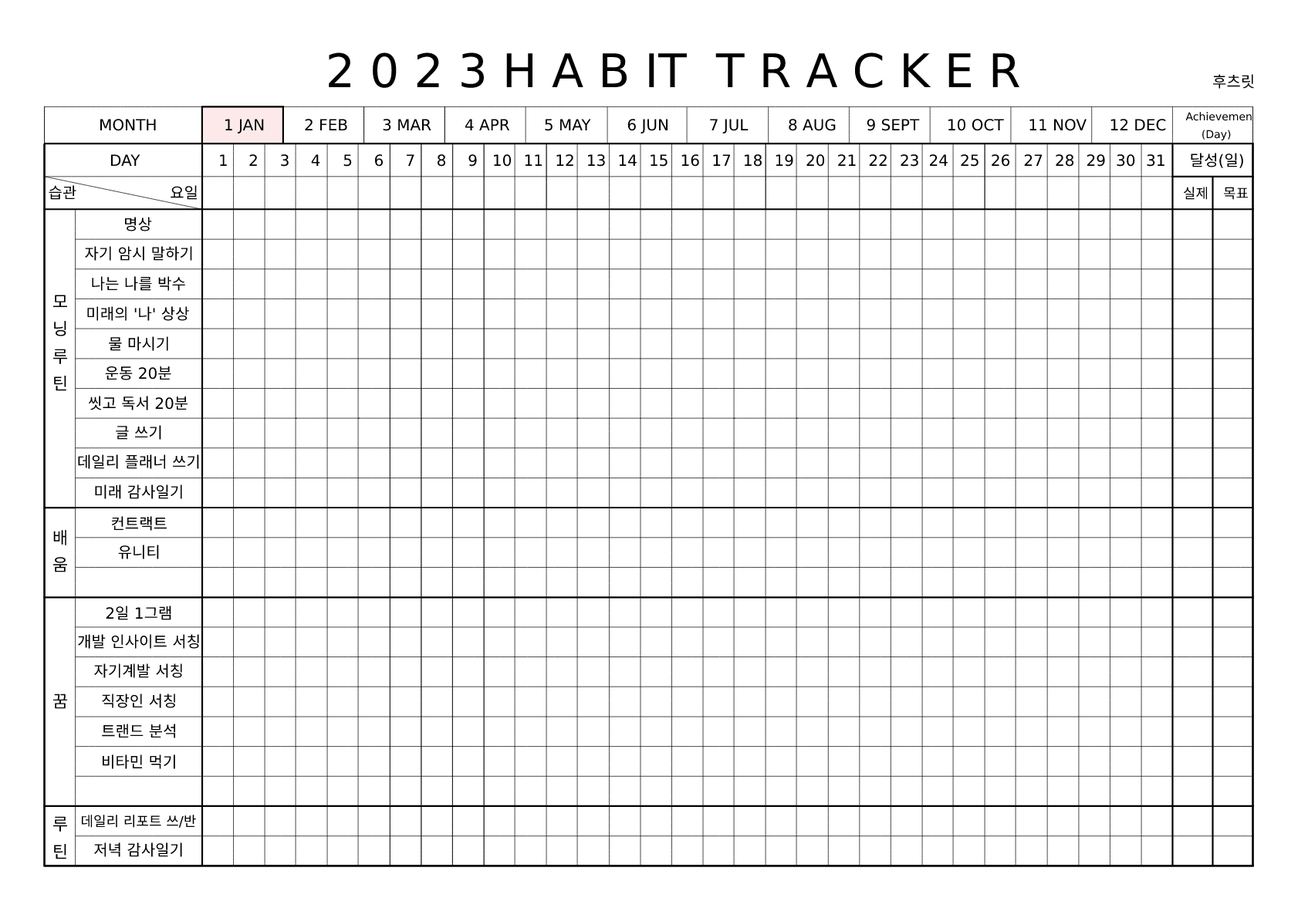
<style>
.page{position:relative;width:1298px;height:918px;background:#ffffff}
.page>*{position:absolute;margin:0}
.t1{font:46.3px "SDSamliphopangcheTTFOutline";color:#000000}
.t2{font:15.4px "SDSamliphopangcheTTFBasic";color:#000000}
.t3{font:10.8px "SDSamliphopangcheTTFBasic";color:#000000}
.t4{font:13.9px "SDSamliphopangcheTTFBasic";color:#000000}
.t5{font:17px/27.2px "SDSamliphopangcheTTFBasic";color:#000000}
.t6{font:17px "SDSamliphopangcheTTFBasic";color:#000000}
.t7{font:17px/27px "SDSamliphopangcheTTFBasic";color:#000000}
</style>
<div class="page">
<p class="t1" style="left:329px;top:52px;width:691px;height:36px">2 0 2 3 H A B IT  T R A C K E R</p>
<p class="t2" style="left:1213px;top:74px;width:41px;height:15px">후츠릿</p>
<p class="t3" style="left:1186px;top:112px;width:71px;height:9px">Achievement</p>
<p class="t2" style="left:100px;top:119px;width:56px;height:12px">MONTH</p>
<p class="t2" style="left:225px;top:119px;width:39px;height:15px">1 JAN</p>
<p class="t2" style="left:305px;top:119px;width:42px;height:11px">2 FEB</p>
<p class="t2" style="left:383px;top:119px;width:48px;height:12px">3 MAR</p>
<p class="t2" style="left:465px;top:119px;width:45px;height:11px">4 APR</p>
<p class="t2" style="left:545px;top:119px;width:46px;height:12px">5 MAY</p>
<p class="t2" style="left:628px;top:119px;width:40px;height:15px">6 JUN</p>
<p class="t2" style="left:710px;top:119px;width:39px;height:15px">7 JUL</p>
<p class="t2" style="left:789px;top:119px;width:47px;height:12px">8 AUG</p>
<p class="t2" style="left:867px;top:119px;width:53px;height:12px">9 SEPT</p>
<p class="t2" style="left:949px;top:119px;width:55px;height:12px">10 OCT</p>
<p class="t2" style="left:1030px;top:119px;width:57px;height:12px">11 NOV</p>
<p class="t2" style="left:1111px;top:119px;width:55px;height:12px">12 DEC</p>
<p class="t3" style="left:1203px;top:130px;width:28px;height:10px">(Day)</p>
<p class="t2" style="left:111px;top:154px;width:29px;height:12px">DAY</p>
<p class="t2" style="left:220px;top:154px;width:7px;height:12px">1</p>
<p class="t2" style="left:249px;top:154px;width:8px;height:12px">2</p>
<p class="t2" style="left:281px;top:154px;width:8px;height:13px">3</p>
<p class="t2" style="left:311px;top:154px;width:9px;height:12px">4</p>
<p class="t2" style="left:343px;top:154px;width:9px;height:13px">5</p>
<p class="t2" style="left:374px;top:154px;width:10px;height:13px">6</p>
<p class="t2" style="left:407px;top:154px;width:7px;height:12px">7</p>
<p class="t2" style="left:438px;top:154px;width:8px;height:13px">8</p>
<p class="t2" style="left:469px;top:154px;width:8px;height:13px">9</p>
<p class="t2" style="left:494px;top:154px;width:18px;height:13px">10</p>
<p class="t2" style="left:525px;top:154px;width:18px;height:12px">11</p>
<p class="t2" style="left:557px;top:154px;width:16px;height:12px">12</p>
<p class="t2" style="left:588px;top:154px;width:17px;height:13px">13</p>
<p class="t2" style="left:619px;top:154px;width:18px;height:12px">14</p>
<p class="t2" style="left:651px;top:154px;width:17px;height:13px">15</p>
<p class="t2" style="left:682px;top:154px;width:17px;height:13px">16</p>
<p class="t2" style="left:713px;top:154px;width:18px;height:12px">17</p>
<p class="t2" style="left:745px;top:154px;width:17px;height:13px">18</p>
<p class="t2" style="left:776px;top:154px;width:17px;height:13px">19</p>
<p class="t2" style="left:807px;top:154px;width:18px;height:13px">20</p>
<p class="t2" style="left:838px;top:154px;width:18px;height:12px">21</p>
<p class="t2" style="left:869px;top:154px;width:18px;height:12px">22</p>
<p class="t2" style="left:901px;top:154px;width:17px;height:13px">23</p>
<p class="t2" style="left:929px;top:154px;width:19px;height:12px">24</p>
<p class="t2" style="left:961px;top:154px;width:18px;height:13px">25</p>
<p class="t2" style="left:992px;top:154px;width:18px;height:13px">26</p>
<p class="t2" style="left:1024px;top:154px;width:19px;height:12px">27</p>
<p class="t2" style="left:1056px;top:154px;width:18px;height:13px">28</p>
<p class="t2" style="left:1087px;top:154px;width:18px;height:13px">29</p>
<p class="t2" style="left:1117px;top:154px;width:18px;height:13px">30</p>
<p class="t2" style="left:1147px;top:154px;width:18px;height:13px">31</p>
<p class="t2" style="left:1191px;top:153px;width:52px;height:15px">달성(일)</p>
<p class="t2" style="left:49px;top:185px;width:148px;height:15px">습관                   요일</p>
<p class="t4" style="left:1183px;top:187px;width:25px;height:13px">실제</p>
<p class="t4" style="left:1223px;top:187px;width:26px;height:13px">목표</p>
<p class="t2" style="left:125px;top:217px;width:27px;height:15px">명상</p>
<p class="t2" style="left:85px;top:246px;width:107px;height:15px">자기 암시 말하기</p>
<p class="t2" style="left:92px;top:276px;width:93px;height:15px">나는 나를 박수</p>
<p class="t5" style="left:53px;top:295px;width:14px;height:96px"><span class="t6">모<br></span>닝 루 틴</p>
<p class="t2" style="left:87px;top:306px;width:102px;height:15px">미래의 '나' 상상</p>
<p class="t2" style="left:109px;top:337px;width:59px;height:14px">물 마시기</p>
<p class="t2" style="left:105px;top:367px;width:66px;height:14px">운동 20분</p>
<p class="t2" style="left:88px;top:396px;width:100px;height:15px">씻고 독서 20분</p>
<p class="t2" style="left:116px;top:425px;width:45px;height:15px">글 쓰기</p>
<p class="t2" style="left:78px;top:455px;width:121px;height:14px">데일리 플래너 쓰기</p>
<p class="t2" style="left:95px;top:485px;width:87px;height:14px">미래 감사일기</p>
<p class="t2" style="left:111px;top:516px;width:56px;height:15px">컨트랙트</p>
<p class="t5" style="left:53px;top:529px;width:14px;height:44px">배<span class="t7"><br>움</span></p>
<p class="t2" style="left:118px;top:545px;width:41px;height:15px">유니티</p>
<p class="t2" style="left:106px;top:606px;width:65px;height:15px">2일 1그램</p>
<p class="t2" style="left:78px;top:634px;width:121px;height:15px">개발 인사이트 서칭</p>
<p class="t2" style="left:94px;top:664px;width:88px;height:14px">자기계발 서칭</p>
<p class="t6" style="left:53px;top:694px;width:14px;height:15px">꿈</p>
<p class="t2" style="left:102px;top:694px;width:73px;height:15px">직장인 서칭</p>
<p class="t2" style="left:102px;top:724px;width:73px;height:15px">트랜드 분석</p>
<p class="t2" style="left:103px;top:755px;width:72px;height:15px">비타민 먹기</p>
<p class="t5" style="left:53px;top:817px;width:14px;height:43px">루 틴</p>
<p class="t4" style="left:81px;top:815px;width:115px;height:13px">데일리 리포트 쓰/반</p>
<p class="t2" style="left:94px;top:843px;width:88px;height:15px">저녁 감사일기</p>
</div>
